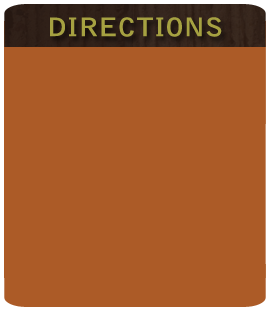
<style>
.page{position:relative;width:270px;height:310px;background:#ac5b27}
.page>*{position:absolute;margin:0}
.t1{font:25px "BellGothicStd-Bold";color:#a6a141;scale:1.18 1}
</style>
<div class="page">
<p class="t1" style="left:50px;top:17px;width:172px;height:20px">DIRECTIONS</p>
</div>
